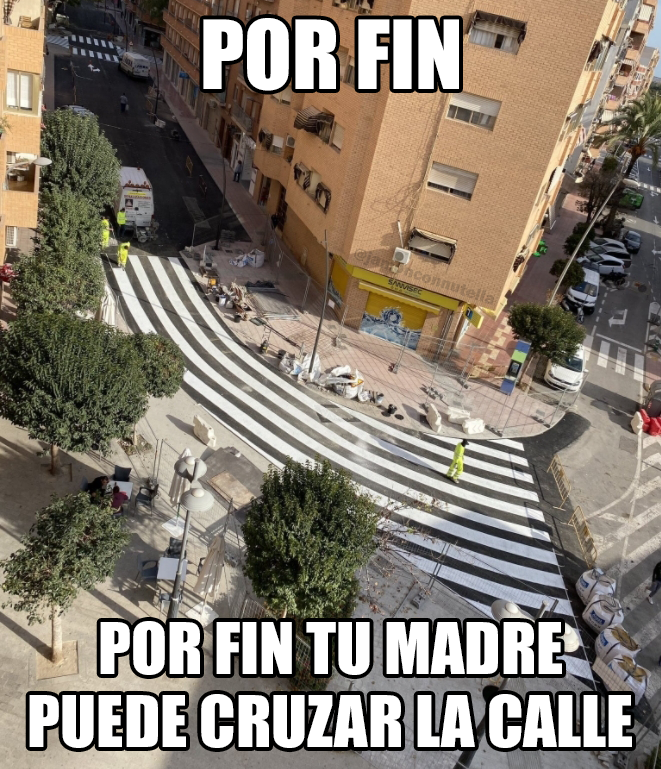
<style>
.page{position:relative;width:661px;height:769px}
.page>*{position:absolute;margin:0}
.t1{font:88px "Impact";color:#ffffff}
.t2{font:65.8px "Impact";color:#ffffff}
</style>
<div class="page">
<p class="t1" style="left:203px;top:18px;width:256px;height:73px">POR FIN</p>
<p class="t2" style="left:29px;top:621px;width:603px;height:127px;text-align:center">POR FIN TU MADRE<br>PUEDE CRUZAR LA CALLE</p>
</div>
